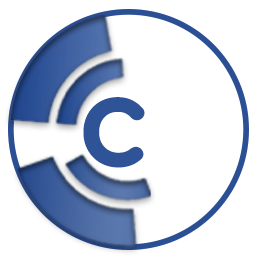
<style>
.page{position:relative;width:256px;height:256px;background:#ffffff}
.page>*{position:absolute;margin:0}
.t1{font:119.6px "Comfortaa-Bold";color:#2e5396;font-weight:bold}
</style>
<div class="page">
<p class="t1" style="left:83px;top:97px;width:62px;height:71px">c</p>
</div>
